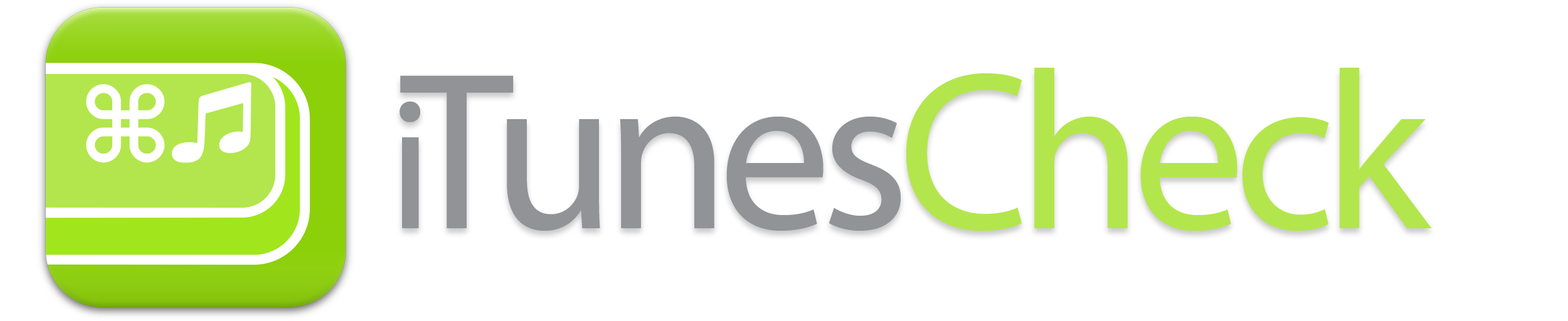
<style>
.page{position:relative;width:1568px;height:321px;background:#ffffff}
.page>*{position:absolute;margin:0}
.t1{font:225.8px "MyriadPro-Regular";letter-spacing:-0.05em;color:#919396}
.t2{font:188.1px "MyriadPro-Regular";letter-spacing:-0.17em;color:#919396}
.t3{font:225.8px "MyriadPro-Regular";letter-spacing:-0.05em;color:#b3e64c}
</style>
<div class="page">
<p class="t1" style="left:400px;top:68px;width:1032px;height:163px"><span class="t2">i</span>Tunes<span class="t3">Check</span></p>
</div>
